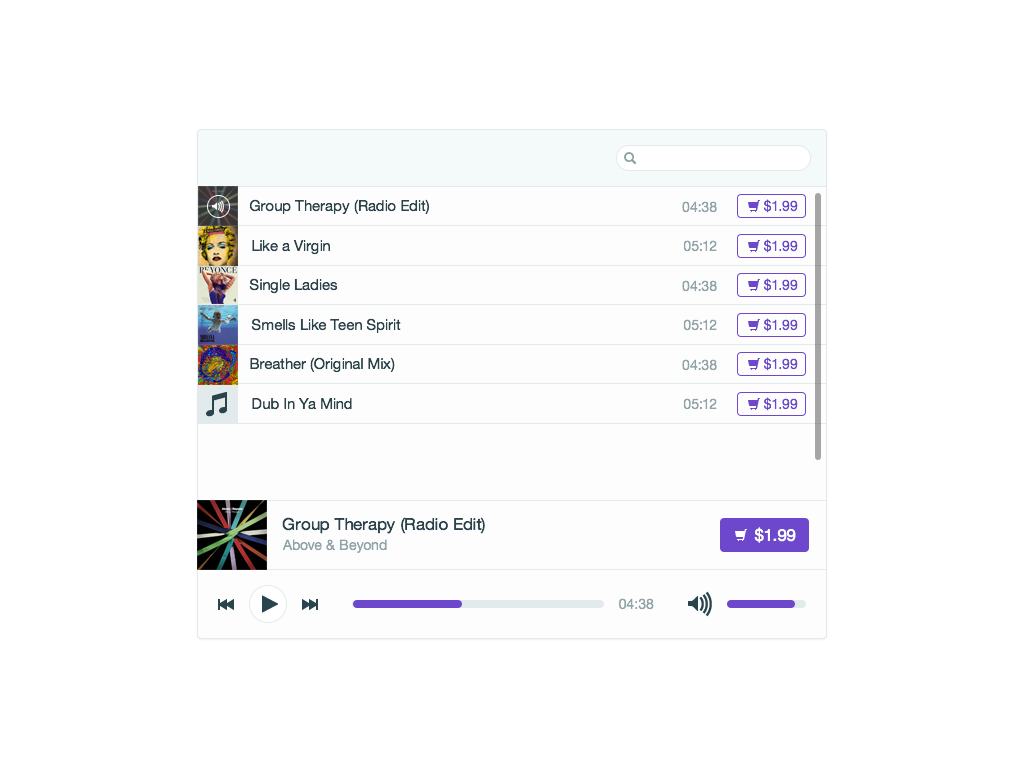
<style>
.page{position:relative;width:1024px;height:768px;background:#ffffff}
.page>*{position:absolute;margin:0}
.t1{font:15px "HelveticaNeueLTStd-Roman";color:#28444d}
.t2{font:14px "HelveticaNeueLTStd-Roman";color:#90a3a8}
.t3{font:14px "HelveticaNeueLTStd-Roman";color:#6d48cc}
.t4{font:17px "HelveticaNeueLTStd-Roman";letter-spacing:-0.005em;color:#28444d}
.t5{font:17px "HelveticaNeueLTStd-Roman";letter-spacing:-0.005em;color:#ffffff}
.t6{font:14px "HelveticaNeueLTStd-Roman";letter-spacing:-0.005em;color:#90a3a8}
</style>
<div class="page">
<p class="t1" style="left:249px;top:199px;width:181px;height:16px">Group Therapy (Radio Edit)</p>
<p class="t2" style="left:682px;top:201px;width:35px;height:12px">04:38</p>
<p class="t3" style="left:763px;top:199px;width:35px;height:14px">$1.99</p>
<p class="t1" style="left:252px;top:240px;width:78px;height:15px">Like a Virgin</p>
<p class="t2" style="left:683px;top:240px;width:34px;height:12px">05:12</p>
<p class="t3" style="left:763px;top:239px;width:35px;height:14px">$1.99</p>
<p class="t1" style="left:249px;top:278px;width:89px;height:16px">Single Ladies</p>
<p class="t2" style="left:682px;top:280px;width:35px;height:12px">04:38</p>
<p class="t3" style="left:763px;top:278px;width:35px;height:14px">$1.99</p>
<p class="t1" style="left:251px;top:318px;width:150px;height:15px">Smells Like Teen Spirit</p>
<p class="t3" style="left:763px;top:318px;width:35px;height:14px">$1.99</p>
<p class="t2" style="left:683px;top:319px;width:34px;height:12px">05:12</p>
<p class="t1" style="left:250px;top:357px;width:145px;height:16px">Breather (Original Mix)</p>
<p class="t2" style="left:682px;top:359px;width:35px;height:12px">04:38</p>
<p class="t3" style="left:763px;top:357px;width:35px;height:14px">$1.99</p>
<p class="t1" style="left:252px;top:398px;width:100px;height:12px">Dub In Ya Mind</p>
<p class="t2" style="left:683px;top:398px;width:34px;height:12px">05:12</p>
<p class="t3" style="left:763px;top:397px;width:35px;height:14px">$1.99</p>
<p class="t4" style="left:282px;top:517px;width:203px;height:17px">Group Therapy (Radio Edit)</p>
<p class="t5" style="left:754px;top:527px;width:42px;height:16px">$1.99</p>
<p class="t6" style="left:282px;top:539px;width:105px;height:14px">Above &amp; Beyond</p>
<p class="t6" style="left:619px;top:598px;width:35px;height:12px">04:38</p>
</div>
